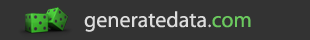
<style>
.page{position:relative;width:310px;height:40px;background:#333333}
.page>*{position:absolute;margin:0}
.t1{font:22px "MyriadPro-Regular";color:#dddddd}
.t2{font:22px "MyriadPro-Regular";color:#cecece}
.t3{font:22px "MyriadPro-Regular";color:#6bc95e}
</style>
<div class="page">
<p class="t1" style="left:84px;top:11px;width:167px;height:21px">generatedata<span class="t2">.</span><span class="t3">com</span></p>
</div>
